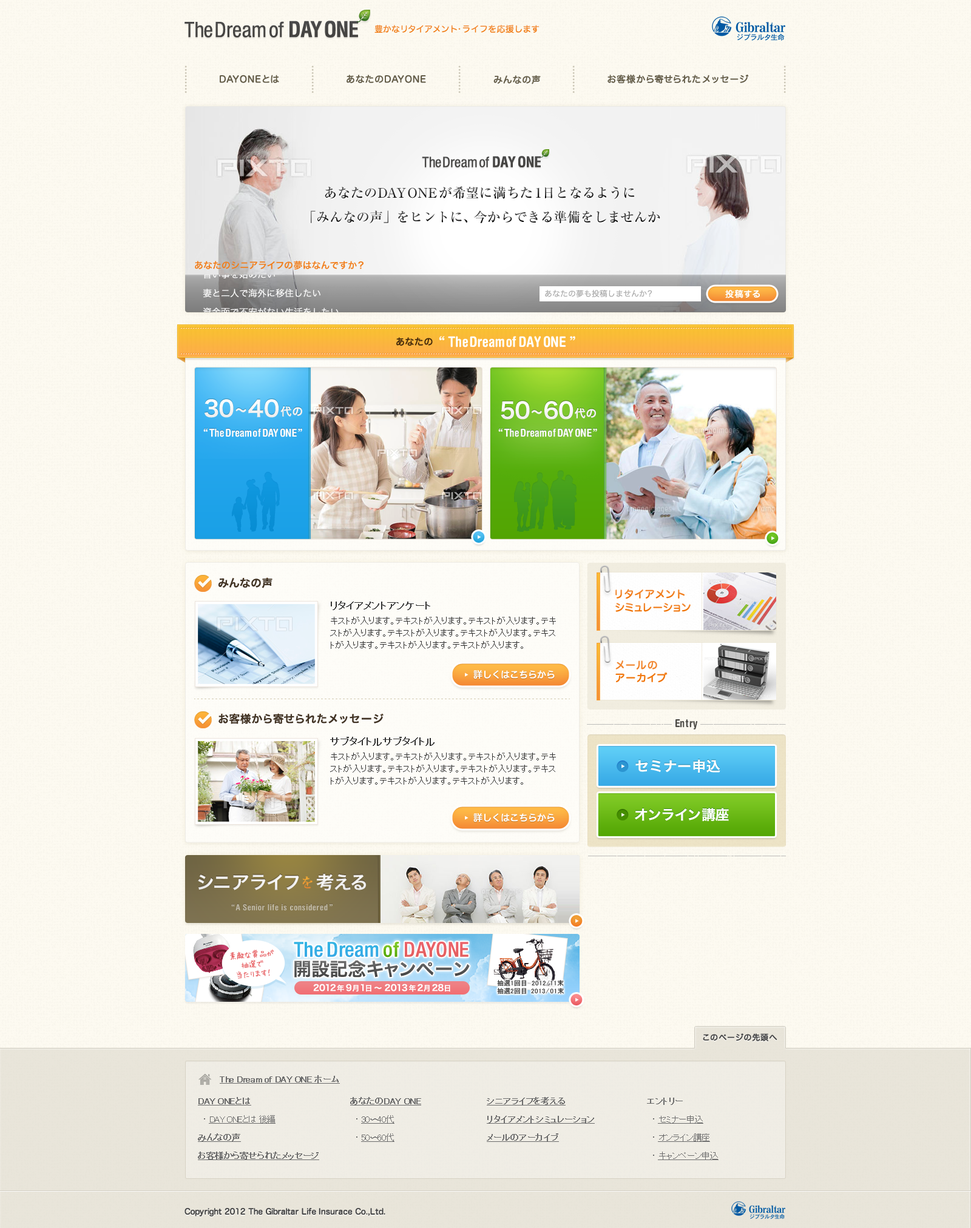
<style>
.page{position:relative;width:971px;height:1228px}
.page>*{position:absolute;margin:0}
.t1{font:21.2px "Helvetica57-Condensed";color:#474644}
.t2{font:21.2px "Helvetica-CondensedBold";color:#474644}
.t3{font:8.5px "HiraMaruProN-W4";color:#f18020}
.t4{font:9.1px "HiraMaruProN-W4";letter-spacing:0.05em;color:#665f4a;font-weight:bold}
.t5{font:14.3px "Helvetica57-Condensed";color:#474644}
.t6{font:14.3px "Helvetica-CondensedBold";color:#474644}
.t7{font:13.3px "RyuminPro-Medium"}
.t8{font:9.1px "HiraKakuPro-W6";color:#f17d1a}
.t9{font:9.1px "HiraKakuPro-W3"}
.t10{font:9.1px "HiraKakuPro-W3";color:#ffffff}
.t11{font:7.9px "HiraKakuPro-W3";color:#a9a9a9}
.t12{font:8.5px "HiraMaruProN-W4";color:#ffffff;font-weight:bold}
.t13{font:9.1px "HiraMaruProN-W4";color:#482d0c;font-weight:bold}
.t14{font:14.6px "HelveticaRounded-CondBold";color:#ffffff}
.t15{font:21.8px "HiraKakuPro-W6";color:#f5f5f5}
.t16{font:14px "HiraKakuPro-W6";color:#f5f5f5;scale:0.8 1}
.t17{font:10.9px "HiraKakuPro-W6";color:#f5f5f5}
.t18{font:21.8px "HiraKakuPro-W6";color:#f6f6f6}
.t19{font:14px "HiraKakuPro-W6";color:#f6f6f6;scale:0.8 1}
.t20{font:10.9px "HiraKakuPro-W6";color:#f6f6f6}
.t21{font:10.9px "HelveticaRounded-CondBold";color:#ffffff}
.t22{font:10.9px "HiraKakuPro-W6";color:#423425}
.t23{font:10.3px "HiraMaruProN-W4";color:#f18224;font-weight:bold}
.t24{font:9.1px/12.1px "MS-PGothic";color:#333333}
.t25{font:9.7px/14.6px "MS-PGothic";color:#333333;font-weight:bold}
.t26{font:9.1px/14.6px "MS-PGothic";color:#333333}
.t27{font:10.3px "HiraMaruProN-W4";color:#f17d1b;font-weight:bold}
.t28{font:10.3px/12.7px "HiraMaruProN-W4";letter-spacing:0.02em;font-weight:bold}
.t29{font:9.1px "HiraMaruProN-W4";color:#ffffff;font-weight:bold}
.t30{font:10.9px "HelveticaRounded-CondBold";color:#4e4c48}
.t31{font:14px "HiraKakuPro-W6";color:#ffffff}
.t32{font:14px "HiraKakuPro-W6";letter-spacing:-0.03em;color:#ffffff}
.t33{font:18.2px "HiraKakuPro-W6";color:#efeeee}
.t34{font:14px "RyuminPro-Medium";color:#eb9a34}
.t35{font:8.5px "HelveticaRounded-CondBold";letter-spacing:0.05em;color:#c5bfad}
.t36{font:20.6px "Helvetica67-CondensedMedium";color:#e76165}
.t37{font:7.9px/9.7px "HuiFontP";letter-spacing:-0.05em;color:#e76164}
.t38{font:20.6px "Helvetica67-CondensedMedium";color:#35aee5}
.t39{font:20.6px "Helvetica67-CondensedMedium";color:#69b815}
.t40{font:18.2px "HiraKakuPro-W6";color:#565656}
.t41{font:8.5px "HiraKakuPro-W6";color:#ffffff}
.t42{font:7.3px "HiraKakuPro-W6";color:#ffffff}
.t43{font:7.9px "HiraKakuPro-W6";color:#ffffff}
.t44{font:6.7px/7.9px "MS-PGothic";color:#323232}
.t45{font:7.9px "HiraMaruProN-W4";letter-spacing:-0.03em;color:#444444;font-weight:bold}
.t46{font:8.5px "MS-PGothic";letter-spacing:-0.03em;color:#6d6d6d;font-weight:bold;text-decoration:underline}
.t47{font:8.5px/18.2px "MS-PGothic";letter-spacing:-0.03em;color:#6d6d6d;font-weight:bold;text-decoration:underline}
.t48{font:8.5px/18.2px "MS-PGothic";letter-spacing:-0.03em;color:#6d6d6d}
.t49{font:8.5px/18.2px "MS-PGothic";letter-spacing:-0.03em;color:#6d6d6d;text-decoration:underline}
.t50{font:8.5px/18.2px "MS-PGothic";letter-spacing:-0.03em;color:#6d6d6d;font-weight:bold}
</style>
<div class="page">
<p class="t1" style="left:184px;top:21px;width:174px;height:17px">The Dream of <span class="t2">DAY ONE</span></p>
<p class="t3" style="left:374px;top:25px;width:165px;height:8px">豊かなリタイアメント・ライフを応援します</p>
<p class="t4" style="left:220px;top:75px;width:59px;height:8px">DAYONEとは</p>
<p class="t4" style="left:346px;top:75px;width:80px;height:9px">あなたのDAYONE</p>
<p class="t4" style="left:493px;top:75px;width:48px;height:9px">みんなの声</p>
<p class="t4" style="left:607px;top:75px;width:142px;height:9px">お客様から寄せられたメッセージ</p>
<p class="t5" style="left:422px;top:156px;width:119px;height:11px">The Dream of <span class="t6">DAY ONE</span></p>
<p class="t7" style="left:325px;top:186px;width:310px;height:13px">あなたのDAY ONEが希望に満ちた1日となるように</p>
<p class="t7" style="left:311px;top:211px;width:349px;height:13px">「みんなの声」をヒントに、今からできる準備をしませんか</p>
<p class="t8" style="left:195px;top:261px;width:168px;height:9px">あなたのシニアライフの夢はなんですか？</p>
<p class="t9" style="left:203px;top:270px;width:72px;height:9px">習い事を始めたい</p>
<p class="t10" style="left:203px;top:289px;width:117px;height:9px">妻と二人で海外に移住したい</p>
<p class="t11" style="left:545px;top:290px;width:107px;height:8px">あなたの夢も投稿しませんか?</p>
<p class="t12" style="left:725px;top:289px;width:35px;height:9px">投稿する</p>
<p class="t10" style="left:203px;top:308px;width:136px;height:9px">資金面で不安がない生活をしたい</p>
<p class="t13" style="left:396px;top:337px;width:37px;height:9px">あなたの</p>
<p class="t14" style="left:439px;top:336px;width:136px;height:12px">“ The Dream of DAY ONE ”</p>
<p class="t15" style="left:204px;top:399px;width:98px;height:19px">30<span class="t16">〜</span>40<span class="t17">代の</span></p>
<p class="t18" style="left:500px;top:401px;width:96px;height:19px">50<span class="t19">〜</span>60<span class="t20">代の</span></p>
<p class="t21" style="left:203px;top:428px;width:99px;height:9px">“ The Dream of DAYONE”</p>
<p class="t21" style="left:498px;top:428px;width:99px;height:9px">“ The Dream of DAYONE”</p>
<p class="t22" style="left:218px;top:578px;width:54px;height:10px">みんなの声</p>
<p class="t23" style="left:615px;top:589px;width:70px;height:10px">リタイアメント</p>
<p class="t24" style="left:330px;top:601px;width:226px;height:48px"><span class="t25">リタイアメントアンケート<br></span><span class="t26">キストが入ります。テキストが入ります。テキストが入ります。テキ</span>ストが入ります。テキストが入ります。テキストが入ります。テキストが入ります。テキストが入ります。テキストが入ります。</p>
<p class="t27" style="left:615px;top:603px;width:75px;height:9px">シミュレーション</p>
<p class="t28" style="left:615px;top:661px;width:52px;height:21px">メールの<br>アーカイブ</p>
<p class="t29" style="left:473px;top:670px;width:81px;height:9px">詳しくはこちらから</p>
<p class="t22" style="left:218px;top:713px;width:165px;height:11px">お客様から寄せられたメッセージ</p>
<p class="t30" style="left:675px;top:719px;width:22px;height:11px">Entry</p>
<p class="t24" style="left:330px;top:737px;width:226px;height:48px"><span class="t25">サブタイトルサブタイトル<br></span><span class="t26">キストが入ります。テキストが入ります。テキストが入ります。テキ</span>ストが入ります。テキストが入ります。テキストが入ります。テキストが入ります。テキストが入ります。テキストが入ります。</p>
<p class="t31" style="left:635px;top:760px;width:85px;height:13px">セミナー申込</p>
<p class="t32" style="left:635px;top:808px;width:94px;height:13px">オンライン講座</p>
<p class="t29" style="left:473px;top:814px;width:81px;height:9px">詳しくはこちらから</p>
<p class="t33" style="left:198px;top:874px;width:168px;height:17px">シニアライフ   考える</p>
<p class="t34" style="left:302px;top:877px;width:10px;height:12px">を</p>
<p class="t35" style="left:231px;top:904px;width:101px;height:7px">“A Senior life is considered”</p>
<p class="t36" style="left:405px;top:942px;width:63px;height:16px">DAY ONE</p>
<p class="t37" style="left:230px;top:950px;width:44px;height:29px;text-align:center;rotate:-5deg">素敵な賞品が<br>抽選で<br>当たります！</p>
<p class="t38" style="left:294px;top:942px;width:85px;height:16px">The Dream</p>
<p class="t39" style="left:383px;top:942px;width:16px;height:16px">of</p>
<p class="t40" style="left:294px;top:960px;width:176px;height:18px">開設記念キャンペーン</p>
<p class="t41" style="left:313px;top:984px;width:137px;height:8px">2012<span class="t42">年</span>9<span class="t42">月</span>1<span class="t42">日</span><span class="t43">〜</span>2013<span class="t42">年</span>2<span class="t42">月</span>28<span class="t42">日</span></p>
<p class="t44" style="left:497px;top:980px;width:67px;height:15px">抽選1回目　2012/11末<br>抽選2回目  2013/01末</p>
<p class="t45" style="left:703px;top:1034px;width:74px;height:8px">このページの先頭へ</p>
<p class="t46" style="left:220px;top:1076px;width:120px;height:8px">The Dream of DAY ONE ホーム</p>
<p class="t47" style="left:198px;top:1097px;width:121px;height:64px">DAY ONEとは<br><span class="t48">　・ </span><span class="t49">DAY ONEとは 後編<br></span>みんなの声<br>お客様から寄せられたメッセージ</p>
<p class="t47" style="left:350px;top:1097px;width:71px;height:45px">あなたのDAY ONE<br><span class="t48">　・ </span><span class="t49">30〜40代<br></span><span class="t48">　・ </span><span class="t49">50〜60代</span></p>
<p class="t47" style="left:487px;top:1097px;width:108px;height:45px">シニアライフを考える<br>リタイアメントシミュレーション<br>メールのアーカイブ</p>
<p class="t49" style="left:647px;top:1098px;width:71px;height:63px"><span class="t50">エントリー<br></span><span class="t48">　・ </span>セミナー申込<br><span class="t48">　・ </span>オンライン講座<br><span class="t48">　・ </span>キャンペーン申込</p>
<p class="t45" style="left:184px;top:1208px;width:201px;height:9px">Copyright 2012 The Gibraltar Life Insurace Co.,Ltd.</p>
</div>
